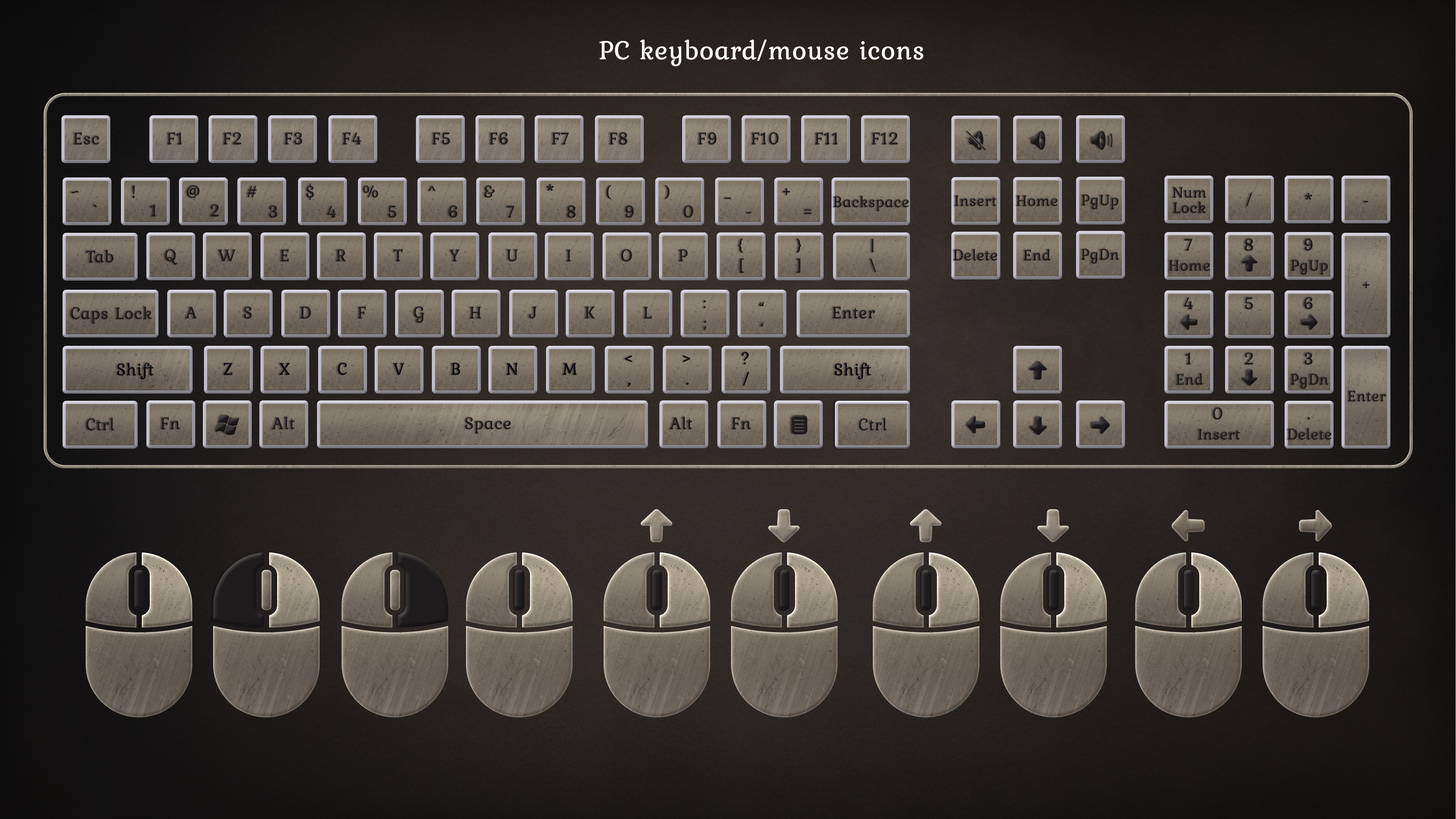
<style>
.page{position:relative;width:1456px;height:819px}
.page>*{position:absolute;margin:0}
.t1{font:27.3px "Kurale-Regular";color:#ffffff;font-weight:bold}
.t2{font:17.7px "Kurale-Regular";color:#1e1c1c;font-weight:bold}
.t3{font:15.9px "Kurale-Regular";color:#1e1c1c;font-weight:bold}
.t4{font:15.9px/5.1px "Kurale-Regular";color:#1e1c1c;font-weight:bold}
.t5{font:17.7px "Kurale-Regular";color:#0a060c;font-weight:bold}
</style>
<div class="page">
<p class="t1" style="left:599px;top:39px;width:324px;height:27px">PC keyboard/mouse icons</p>
<p class="t2" style="left:74px;top:132px;width:25px;height:13px">Esc</p>
<p class="t2" style="left:167px;top:132px;width:15px;height:12px">F1</p>
<p class="t2" style="left:223px;top:132px;width:19px;height:12px">F2</p>
<p class="t2" style="left:284px;top:132px;width:18px;height:12px">F3</p>
<p class="t2" style="left:343px;top:132px;width:18px;height:12px">F4</p>
<p class="t2" style="left:432px;top:132px;width:18px;height:12px">F5</p>
<p class="t2" style="left:489px;top:132px;width:19px;height:12px">F6</p>
<p class="t2" style="left:552px;top:132px;width:17px;height:12px">F7</p>
<p class="t2" style="left:609px;top:132px;width:19px;height:13px">F8</p>
<p class="t2" style="left:698px;top:132px;width:19px;height:12px">F9</p>
<p class="t2" style="left:751px;top:132px;width:28px;height:12px">F10</p>
<p class="t2" style="left:815px;top:132px;width:23px;height:12px">F11</p>
<p class="t2" style="left:872px;top:132px;width:26px;height:12px">F12</p>
<p class="t2" style="left:132px;top:185px;width:3px;height:13px">!</p>
<p class="t2" style="left:187px;top:185px;width:13px;height:13px">@</p>
<p class="t2" style="left:247px;top:186px;width:10px;height:12px">#</p>
<p class="t2" style="left:306px;top:183px;width:8px;height:17px">$</p>
<p class="t2" style="left:363px;top:185px;width:15px;height:13px">%</p>
<p class="t2" style="left:428px;top:186px;width:8px;height:5px">^</p>
<p class="t2" style="left:484px;top:185px;width:11px;height:13px">&amp;</p>
<p class="t2" style="left:546px;top:184px;width:8px;height:7px">*</p>
<p class="t2" style="left:606px;top:185px;width:5px;height:14px">(</p>
<p class="t2" style="left:665px;top:185px;width:5px;height:14px">)</p>
<p class="t2" style="left:71px;top:191px;width:7px;height:2px">~</p>
<p class="t2" style="left:724px;top:197px;width:7px;height:2px">_</p>
<p class="t2" style="left:783px;top:188px;width:7px;height:7px">+</p>
<p class="t3" style="left:833px;top:195px;width:76px;height:16px">Backspace</p>
<p class="t3" style="left:954px;top:195px;width:42px;height:11px">Insert</p>
<p class="t3" style="left:1016px;top:195px;width:41px;height:11px">Home</p>
<p class="t3" style="left:1081px;top:194px;width:38px;height:16px">PgUp</p>
<p class="t4" style="left:1172px;top:187px;width:34px;height:26px;text-align:center">Num<br><br><br>Lock</p>
<p class="t2" style="left:1246px;top:192px;width:6px;height:14px">/</p>
<p class="t2" style="left:1305px;top:193px;width:7px;height:7px">*</p>
<p class="t2" style="left:93px;top:204px;width:4px;height:3px">`</p>
<p class="t2" style="left:150px;top:204px;width:6px;height:13px">1</p>
<p class="t2" style="left:210px;top:204px;width:9px;height:13px">2</p>
<p class="t2" style="left:269px;top:205px;width:8px;height:13px">3</p>
<p class="t2" style="left:327px;top:206px;width:9px;height:12px">4</p>
<p class="t2" style="left:388px;top:206px;width:8px;height:12px">5</p>
<p class="t2" style="left:449px;top:205px;width:8px;height:13px">6</p>
<p class="t2" style="left:506px;top:206px;width:9px;height:12px">7</p>
<p class="t2" style="left:567px;top:205px;width:9px;height:13px">8</p>
<p class="t2" style="left:625px;top:205px;width:9px;height:13px">9</p>
<p class="t2" style="left:684px;top:205px;width:9px;height:13px">0</p>
<p class="t2" style="left:804px;top:209px;width:7px;height:5px">=</p>
<p class="t2" style="left:1363px;top:201px;width:5px;height:1px">-</p>
<p class="t2" style="left:746px;top:212px;width:5px;height:1px">-</p>
<p class="t2" style="left:738px;top:238px;width:5px;height:15px">{</p>
<p class="t2" style="left:796px;top:238px;width:6px;height:15px">}</p>
<p class="t2" style="left:871px;top:239px;width:3px;height:14px">|</p>
<p class="t2" style="left:1184px;top:238px;width:8px;height:13px">7</p>
<p class="t2" style="left:1244px;top:238px;width:9px;height:13px">8</p>
<p class="t2" style="left:1304px;top:238px;width:9px;height:13px">9</p>
<p class="t2" style="left:86px;top:249px;width:28px;height:14px">Tab</p>
<p class="t2" style="left:165px;top:249px;width:12px;height:16px">Q</p>
<p class="t2" style="left:218px;top:249px;width:17px;height:12px">W</p>
<p class="t2" style="left:280px;top:249px;width:9px;height:13px">E</p>
<p class="t2" style="left:336px;top:249px;width:10px;height:13px">R</p>
<p class="t2" style="left:393px;top:249px;width:10px;height:12px">T</p>
<p class="t2" style="left:449px;top:249px;width:11px;height:12px">Y</p>
<p class="t2" style="left:507px;top:249px;width:11px;height:12px">U</p>
<p class="t2" style="left:566px;top:249px;width:5px;height:12px">I</p>
<p class="t2" style="left:621px;top:249px;width:11px;height:13px">O</p>
<p class="t2" style="left:679px;top:249px;width:9px;height:12px">P</p>
<p class="t3" style="left:953px;top:249px;width:44px;height:11px">Delete</p>
<p class="t3" style="left:1024px;top:249px;width:27px;height:12px">End</p>
<p class="t3" style="left:1081px;top:249px;width:38px;height:15px">PgDn</p>
<p class="t2" style="left:740px;top:258px;width:4px;height:15px">[</p>
<p class="t2" style="left:796px;top:258px;width:4px;height:15px">]</p>
<p class="t2" style="left:870px;top:258px;width:6px;height:14px">\</p>
<p class="t3" style="left:1169px;top:260px;width:41px;height:11px">Home</p>
<p class="t3" style="left:1291px;top:259px;width:37px;height:16px">PgUp</p>
<p class="t3" style="left:1363px;top:282px;width:7px;height:6px">+</p>
<p class="t2" style="left:358px;top:306px;width:8px;height:12px">F</p>
<p class="t2" style="left:703px;top:300px;width:3px;height:8px">:</p>
<p class="t2" style="left:759px;top:302px;width:5px;height:4px">“</p>
<p class="t2" style="left:832px;top:306px;width:43px;height:13px">Enter</p>
<p class="t2" style="left:1184px;top:297px;width:9px;height:12px">4</p>
<p class="t2" style="left:1245px;top:297px;width:8px;height:12px">5</p>
<p class="t2" style="left:1304px;top:297px;width:9px;height:12px">6</p>
<p class="t2" style="left:71px;top:306px;width:81px;height:17px">Caps Lock</p>
<p class="t2" style="left:185px;top:307px;width:12px;height:11px">A</p>
<p class="t2" style="left:244px;top:306px;width:8px;height:12px">S</p>
<p class="t2" style="left:300px;top:306px;width:11px;height:12px">D</p>
<p class="t2" style="left:414px;top:306px;width:10px;height:17px">G</p>
<p class="t2" style="left:470px;top:307px;width:11px;height:11px">H</p>
<p class="t2" style="left:529px;top:306px;width:8px;height:12px">J</p>
<p class="t2" style="left:585px;top:306px;width:10px;height:12px">K</p>
<p class="t2" style="left:643px;top:307px;width:9px;height:12px">L</p>
<p class="t2" style="left:704px;top:320px;width:2px;height:11px">;</p>
<p class="t2" style="left:761px;top:322px;width:3px;height:4px">‘</p>
<p class="t5" style="left:742px;top:352px;width:7px;height:13px">?</p>
<p class="t2" style="left:1185px;top:352px;width:6px;height:13px">1</p>
<p class="t2" style="left:1244px;top:352px;width:9px;height:13px">2</p>
<p class="t2" style="left:1304px;top:352px;width:9px;height:13px">3</p>
<p class="t5" style="left:117px;top:362px;width:37px;height:18px">Shift</p>
<p class="t5" style="left:223px;top:362px;width:10px;height:13px">Z</p>
<p class="t5" style="left:279px;top:363px;width:11px;height:12px">X</p>
<p class="t5" style="left:337px;top:362px;width:10px;height:13px">C</p>
<p class="t5" style="left:393px;top:363px;width:11px;height:12px">V</p>
<p class="t5" style="left:451px;top:362px;width:9px;height:13px">B</p>
<p class="t5" style="left:506px;top:363px;width:12px;height:12px">N</p>
<p class="t5" style="left:563px;top:363px;width:14px;height:12px">M</p>
<p class="t5" style="left:625px;top:355px;width:7px;height:7px">&lt;</p>
<p class="t5" style="left:683px;top:355px;width:7px;height:7px">&gt;</p>
<p class="t5" style="left:835px;top:362px;width:36px;height:18px">Shift</p>
<p class="t5" style="left:743px;top:372px;width:6px;height:14px">/</p>
<p class="t3" style="left:1176px;top:373px;width:27px;height:12px">End</p>
<p class="t3" style="left:1291px;top:373px;width:38px;height:16px">PgDn</p>
<p class="t5" style="left:628px;top:383px;width:3px;height:4px">,</p>
<p class="t5" style="left:686px;top:382px;width:3px;height:3px">.</p>
<p class="t3" style="left:1348px;top:390px;width:38px;height:12px">Enter</p>
<p class="t2" style="left:1213px;top:407px;width:9px;height:13px">0</p>
<p class="t2" style="left:86px;top:417px;width:29px;height:14px">Ctrl</p>
<p class="t2" style="left:161px;top:417px;width:19px;height:13px">Fn</p>
<p class="t2" style="left:271px;top:416px;width:24px;height:14px">Alt</p>
<p class="t2" style="left:465px;top:417px;width:46px;height:17px">Space</p>
<p class="t2" style="left:669px;top:416px;width:23px;height:14px">Alt</p>
<p class="t2" style="left:732px;top:417px;width:19px;height:13px">Fn</p>
<p class="t2" style="left:858px;top:417px;width:29px;height:14px">Ctrl</p>
<p class="t2" style="left:1307px;top:417px;width:3px;height:3px">.</p>
<p class="t3" style="left:1198px;top:429px;width:42px;height:11px">Insert</p>
<p class="t3" style="left:1287px;top:428px;width:44px;height:12px">Delete</p>
</div>
